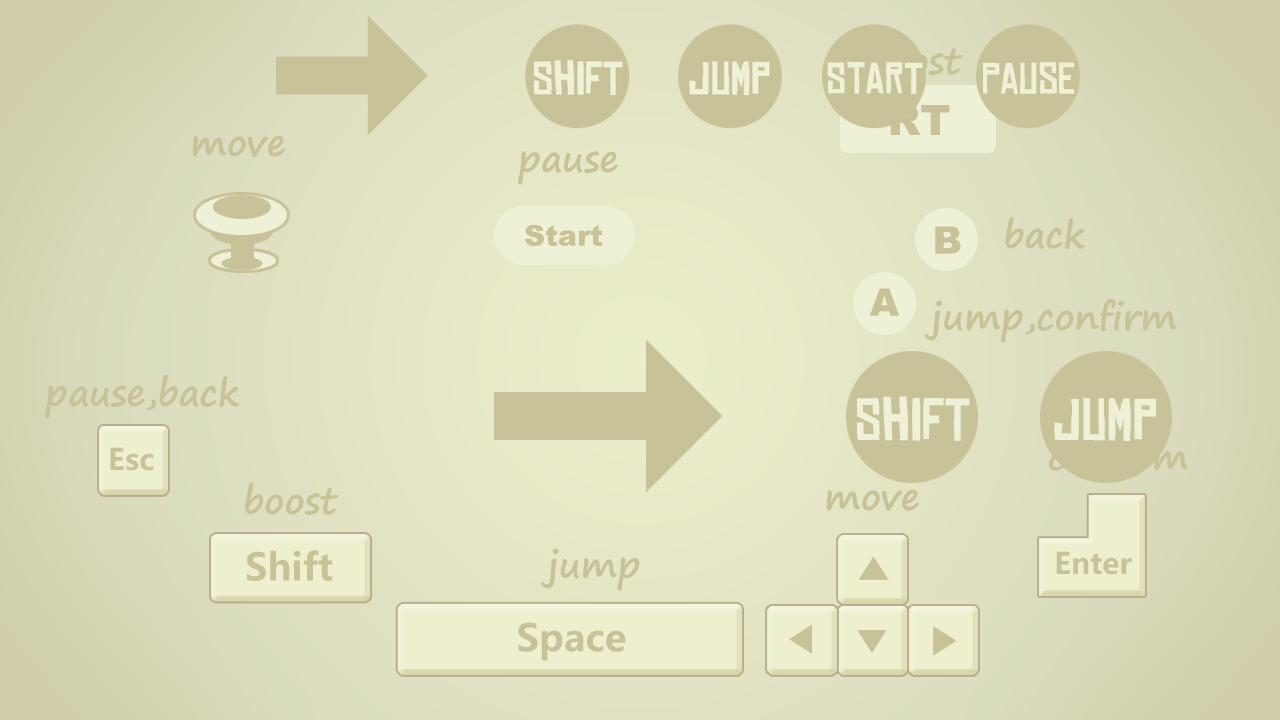
<style>
.page{position:relative;width:1280px;height:720px}
.page>*{position:absolute;margin:0}
.t1{font:36.1px "SegoePrint-Bold";color:#c8c299}
.t2{font:57.1px "ChineseRocksRg-Regular";color:#eff1d7}
.t3{font:29.4px "MicrosoftYaHei-Bold";color:#c8c299}
.t4{font:37.4px "MicrosoftYaHei-Bold";color:#c8c299}
</style>
<div class="page">
<p class="t1" style="left:192px;top:135px;width:93px;height:22px">move</p>
<p class="t1" style="left:518px;top:151px;width:100px;height:34px">pause</p>
<p class="t1" style="left:1005px;top:216px;width:80px;height:33px">back</p>
<p class="t1" style="left:924px;top:299px;width:253px;height:44px">jump,confirm</p>
<p class="t1" style="left:45px;top:374px;width:194px;height:45px">pause,back</p>
<p class="t2" style="left:857px;top:396px;width:113px;height:45px">Shift</p>
<p class="t2" style="left:1054px;top:397px;width:102px;height:44px">Jump</p>
<p class="t3" style="left:110px;top:447px;width:44px;height:24px">Esc</p>
<p class="t1" style="left:245px;top:482px;width:93px;height:33px">boost</p>
<p class="t1" style="left:826px;top:489px;width:93px;height:22px">move</p>
<p class="t4" style="left:246px;top:550px;width:87px;height:31px">Shift</p>
<p class="t1" style="left:541px;top:548px;width:99px;height:43px">jump</p>
<p class="t3" style="left:1056px;top:551px;width:76px;height:24px">Enter</p>
<p class="t4" style="left:518px;top:622px;width:108px;height:39px">Space</p>
</div>
